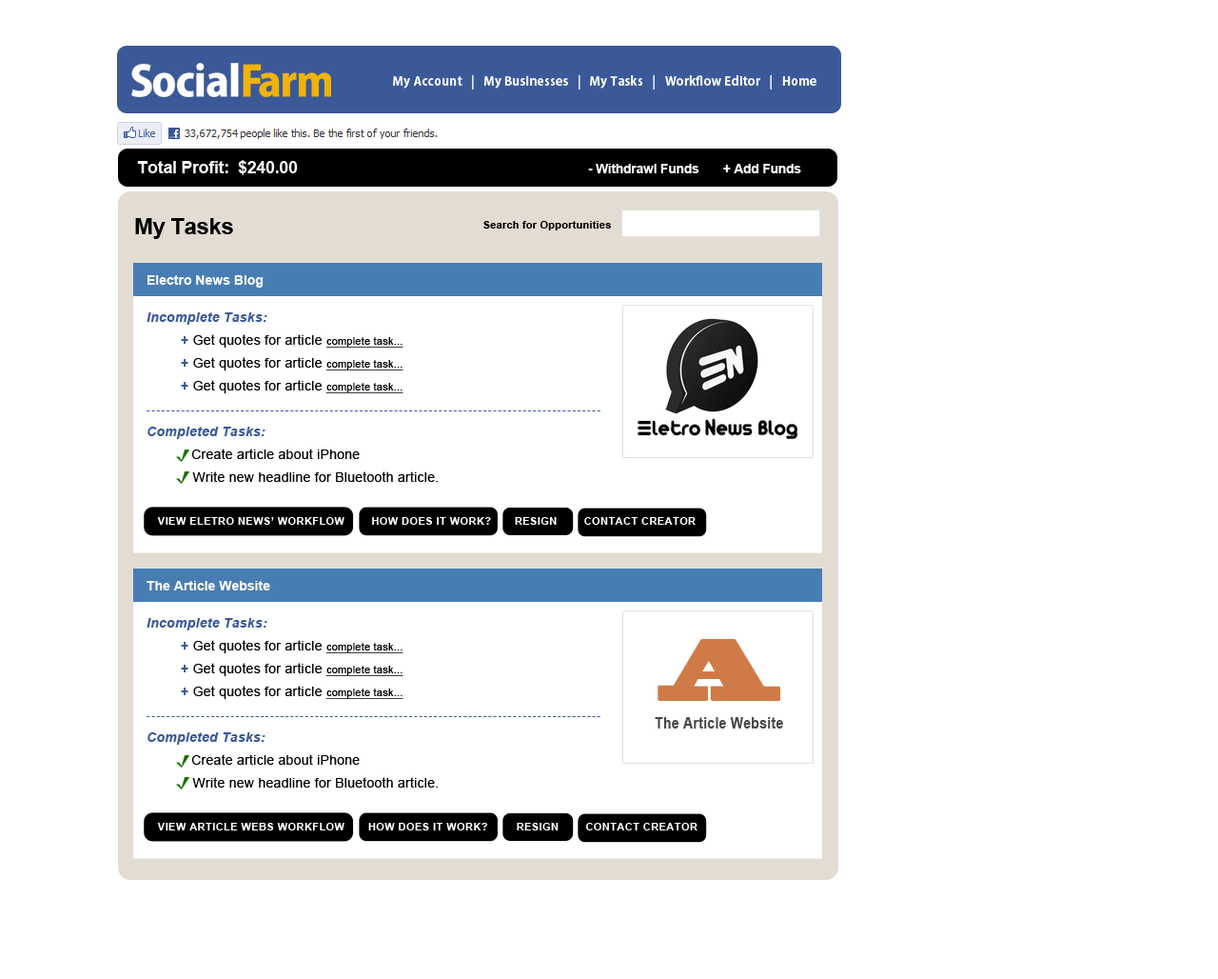
<style>
.page{position:relative;width:1218px;height:979px;background:#ffffff}
.page>*{position:absolute;margin:0}
.t1{font:12.4px "KozGoPro-Bold";letter-spacing:0.02em;color:#ffffff}
.t2{font:13.3px "Arial-BoldMT";letter-spacing:-0.02em;color:#ffffff}
.t3{font:17.1px "Arial-BoldMT";letter-spacing:-0.02em;color:#ffffff}
.t4{font:22.8px "Arial-BoldMT";letter-spacing:-0.02em;color:#000000}
.t5{font:10.5px "Arial-BoldMT";letter-spacing:0.02em;color:#000000}
.t6{font:10.5px/22.8px "ArialMT";letter-spacing:0.14em;color:#3b5998}
.t7{font:13.3px/14.3px "Arial-BoldMT";color:#ffffff}
.t8{font:13.3px/22.8px "Arial-BoldItalicMT";letter-spacing:0.02em;color:#3b5998}
.t9{font:13.3px/22.8px "Arial-BoldMT";letter-spacing:0.02em;color:#3b5998}
.t10{font:13.3px/22.8px "ArialMT";letter-spacing:0.02em;color:#000000}
.t11{font:10.5px/22.8px "ArialMT";letter-spacing:0.02em;color:#000000;text-decoration:underline}
.t12{font:10.5px "Arial-BoldMT";letter-spacing:0.04em;color:#ffffff}
.t13{font:16px/27.5px "Arial-BoldMT";letter-spacing:0.02em;color:#d07b47;scale:0.83 1}
.t14{font:82.5px/27.5px "BlackoakStd";letter-spacing:0.02em;color:#d07b47;scale:0.83 1}
</style>
<div class="page">
<p class="t1" style="left:393px;top:74px;width:424px;height:15px">My Account   |   My Businesses   |   My Tasks   |   Workflow Editor   |   Home</p>
<p class="t2" style="left:137px;top:160px;width:665px;height:15px"><span class="t3">Total Profit:  $240.00                                                                 </span> - Withdrawl Funds       + Add Funds</p>
<p class="t4" style="left:135px;top:218px;width:98px;height:21px">My Tasks</p>
<p class="t5" style="left:484px;top:221px;width:127px;height:9px">Search for Opportunities</p>
<p class="t6" style="left:147px;top:275px;width:454px;height:207px"><span class="t7">Electro News Blog<br><br></span><span class="t8">Incomplete Tasks:<br></span><span class="t9"> + </span><span class="t10">Get quotes for article </span><span class="t11">complete task...<br></span><span class="t9"> + </span><span class="t10">Get quotes for article </span><span class="t11">complete task...<br> </span><span class="t9">+ </span><span class="t10">Get quotes for article </span><span class="t11">complete task...<br></span>--------------------------------------------------------------------------------------------<br><span class="t8">Completed Tasks: <br>   </span><span class="t10">Create article about iPhone  <br>    Write new headline for Bluetooth article.</span></p>
<p class="t12" style="left:157px;top:517px;width:539px;height:8px">VIEW ELETRO NEWS’ WORKFLOW        HOW DOES IT WORK?       RESIGN        CONTACT CREATOR</p>
<p class="t6" style="left:147px;top:581px;width:454px;height:206px"><span class="t7">The Article Website<br><br></span><span class="t8">Incomplete Tasks:<br></span><span class="t9"> + </span><span class="t10">Get quotes for article </span><span class="t11">complete task...<br></span><span class="t9"> + </span><span class="t10">Get quotes for article </span><span class="t11">complete task...<br> </span><span class="t9">+ </span><span class="t10">Get quotes for article </span><span class="t11">complete task...<br></span>--------------------------------------------------------------------------------------------<br><span class="t8">Completed Tasks: <br>   </span><span class="t10">Create article about iPhone  <br>    Write new headline for Bluetooth article.</span></p>
<p class="t13" style="left:655px;top:639px;width:128px;height:89px;text-align:center"><span class="t14">A<br></span>The Article Website</p>
<p class="t12" style="left:157px;top:822px;width:541px;height:8px">VIEW ARTICLE WEBS WORKFLOW       HOW DOES IT WORK?        RESIGN        CONTACT CREATOR</p>
</div>
